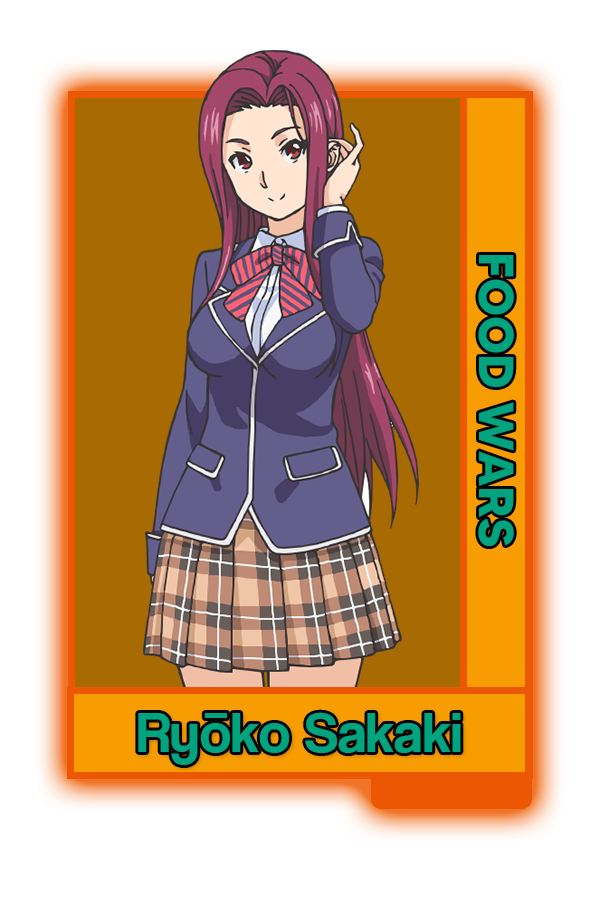
<style>
.page{position:relative;width:600px;height:900px;background:#ffffff}
.page>*{position:absolute;margin:0}
.t1{font:48.8px "MADETOMMY-Bold";color:#009f7b}
.t2{font:58.3px "CoolveticaRg-Regular";color:#009f7b}
</style>
<div class="page">
<p class="t1" style="left:478px;top:255px;width:36px;height:291px;rotate:90deg">FOOD WARS</p>
<p class="t2" style="left:138px;top:712px;width:323px;height:53px">Ryōko Sakaki</p>
</div>
